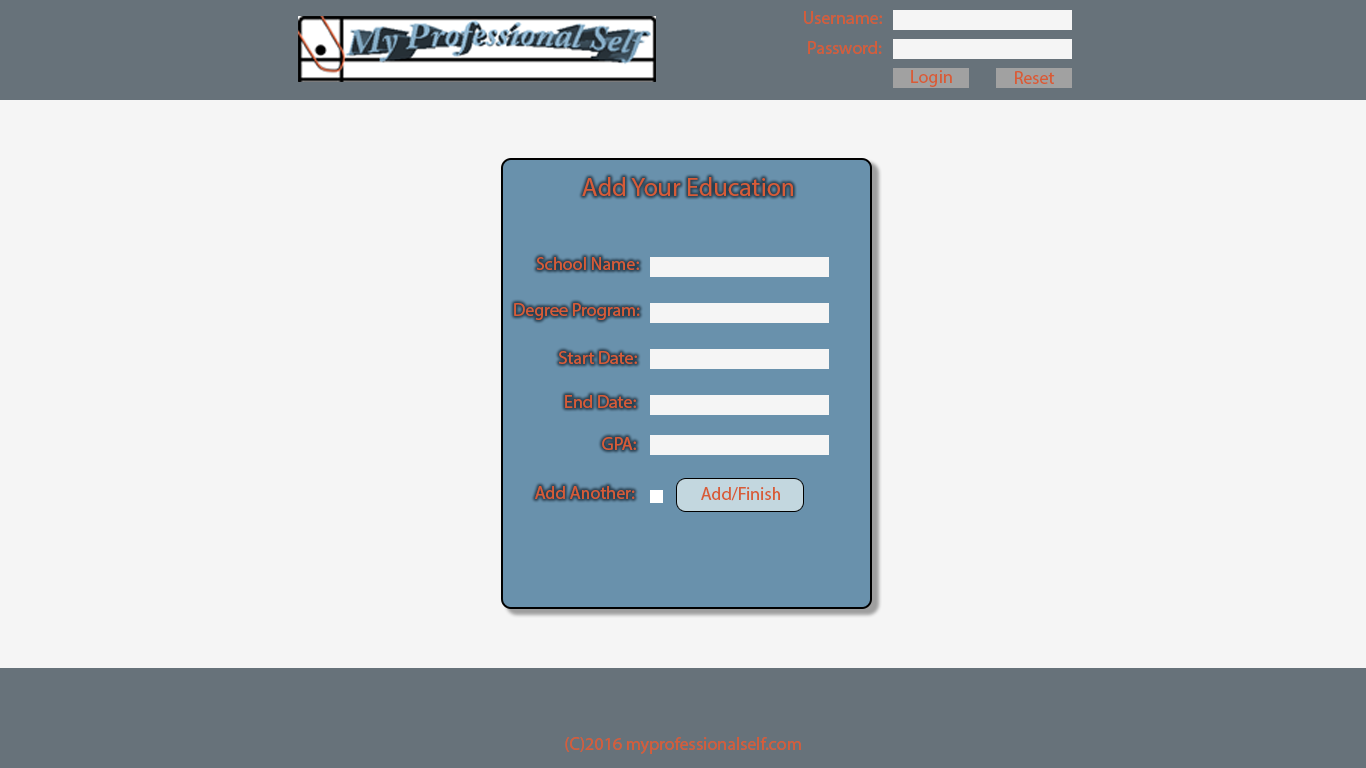
<style>
.page{position:relative;width:1366px;height:768px;background:#f5f5f5}
.page>*{position:absolute;margin:0}
.t1{font:18px "MyriadPro-Regular";color:#d75c37}
.t2{font:26px "MyriadPro-Regular";color:#d75c37}
</style>
<div class="page">
<p class="t1" style="left:804px;top:11px;width:78px;height:13px">Username:</p>
<p class="t1" style="left:808px;top:41px;width:74px;height:13px">Password:</p>
<p class="t1" style="left:911px;top:70px;width:41px;height:17px">Login</p>
<p class="t1" style="left:1015px;top:71px;width:40px;height:13px">Reset</p>
<p class="t2" style="left:582px;top:177px;width:211px;height:19px">Add Your Education</p>
<p class="t1" style="left:536px;top:257px;width:103px;height:13px">School Name:</p>
<p class="t1" style="left:514px;top:303px;width:126px;height:17px">Degree Program:</p>
<p class="t1" style="left:559px;top:351px;width:78px;height:13px;text-align:center">Start Date:<br>StartSt:</p>
<p class="t1" style="left:565px;top:395px;width:71px;height:13px">End Date:</p>
<p class="t1" style="left:602px;top:437px;width:34px;height:13px">GPA:</p>
<p class="t1" style="left:535px;top:486px;width:100px;height:13px">Add Another:</p>
<p class="t1" style="left:701px;top:487px;width:79px;height:14px">Add/Finish</p>
<p class="t1" style="left:565px;top:737px;width:236px;height:17px">(C)2016 myprofessionalself.com</p>
</div>
